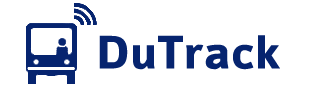
<style>
.page{position:relative;width:324px;height:90px;background:#ffffff}
.page>*{position:absolute;margin:0}
.t1{font:50px "Colaborate-Bold";color:#06246f}
</style>
<div class="page">
<p class="t1" style="left:99px;top:35px;width:181px;height:35px">DuTrack</p>
</div>
